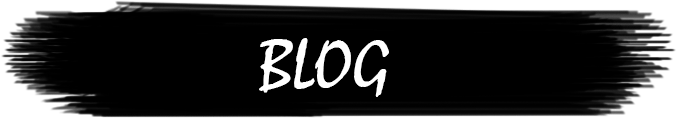
<style>
.page{position:relative;width:677px;height:127px;background:#000000}
.page>*{position:absolute;margin:0}
.t1{font:72px "Mistral";color:#ffffff}
</style>
<div class="page">
<p class="t1" style="left:259px;top:38px;width:130px;height:59px">BLOG</p>
</div>
